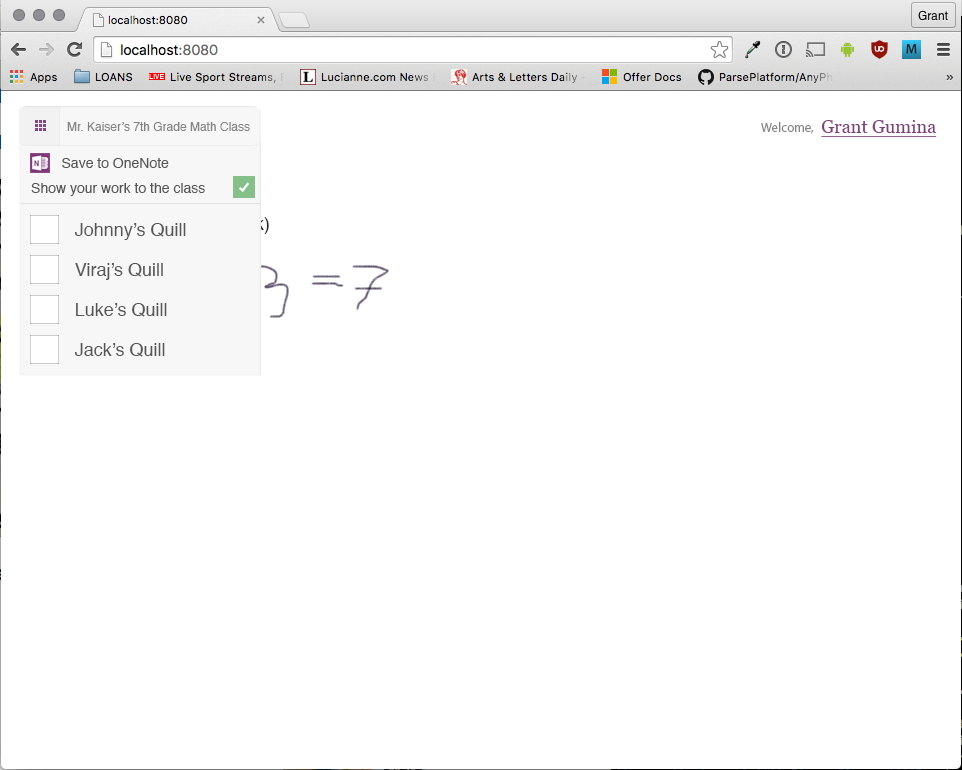
<style>
.page{position:relative;width:962px;height:770px;background:#ffffff}
.page>*{position:absolute;margin:0}
.t1{font:12px "Helvetica";color:#747474}
.t2{font:13px "MyriadPro-Regular";color:#747474}
.t3{font:18px "Georgia";color:#823f7d;text-decoration:underline}
.t4{font:14px "Helvetica";color:#565656}
.t5{font:18px "Helvetica";color:#565656}
</style>
<div class="page">
<p class="t1" style="left:67px;top:122px;width:183px;height:9px;opacity:0.9">Mr. Kaiser’s 7th Grade Math Class</p>
<p class="t2" style="left:761px;top:122px;width:53px;height:12px;opacity:0.9">Welcome,</p>
<p class="t3" style="left:821px;top:120px;width:116px;height:18px">Grant Gumina</p>
<p class="t4" style="left:62px;top:158px;width:107px;height:10px">Save to OneNote</p>
<p class="t4" style="left:31px;top:183px;width:174px;height:13px">Show your work to the class</p>
<p class="t5" style="left:74px;top:223px;width:112px;height:17px">Johnny’s Quill</p>
<p class="t5" style="left:75px;top:263px;width:88px;height:17px">Viraj’s Quill</p>
<p class="t5" style="left:76px;top:303px;width:91px;height:14px">Luke’s Quill</p>
<p class="t5" style="left:74px;top:343px;width:91px;height:14px">Jack’s Quill</p>
</div>
